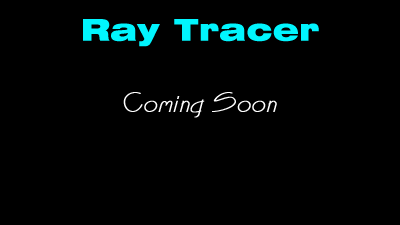
<style>
.page{position:relative;width:400px;height:225px;background:#000000}
.page>*{position:absolute;margin:0}
.t1{font:30px "Swiss721BT-BlackExtended";letter-spacing:0.01em;color:#01f5fe}
.t2{font:24px "CountryBlueprint";letter-spacing:0.01em;color:#ffffff;font-weight:bold}
</style>
<div class="page">
<p class="t1" style="left:83px;top:19px;width:236px;height:28px">Ray Tracer</p>
<p class="t2" style="left:123px;top:92px;width:154px;height:26px">Coming Soon</p>
</div>
